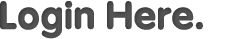
<style>
.page{position:relative;width:230px;height:39px;background:#ffffff}
.page>*{position:absolute;margin:0}
.t1{font:38px "MgOpenModata-Bold";color:#565656}
</style>
<div class="page">
<p class="t1" style="left:0px;top:1px;width:203px;height:38px">Login Here.</p>
</div>
